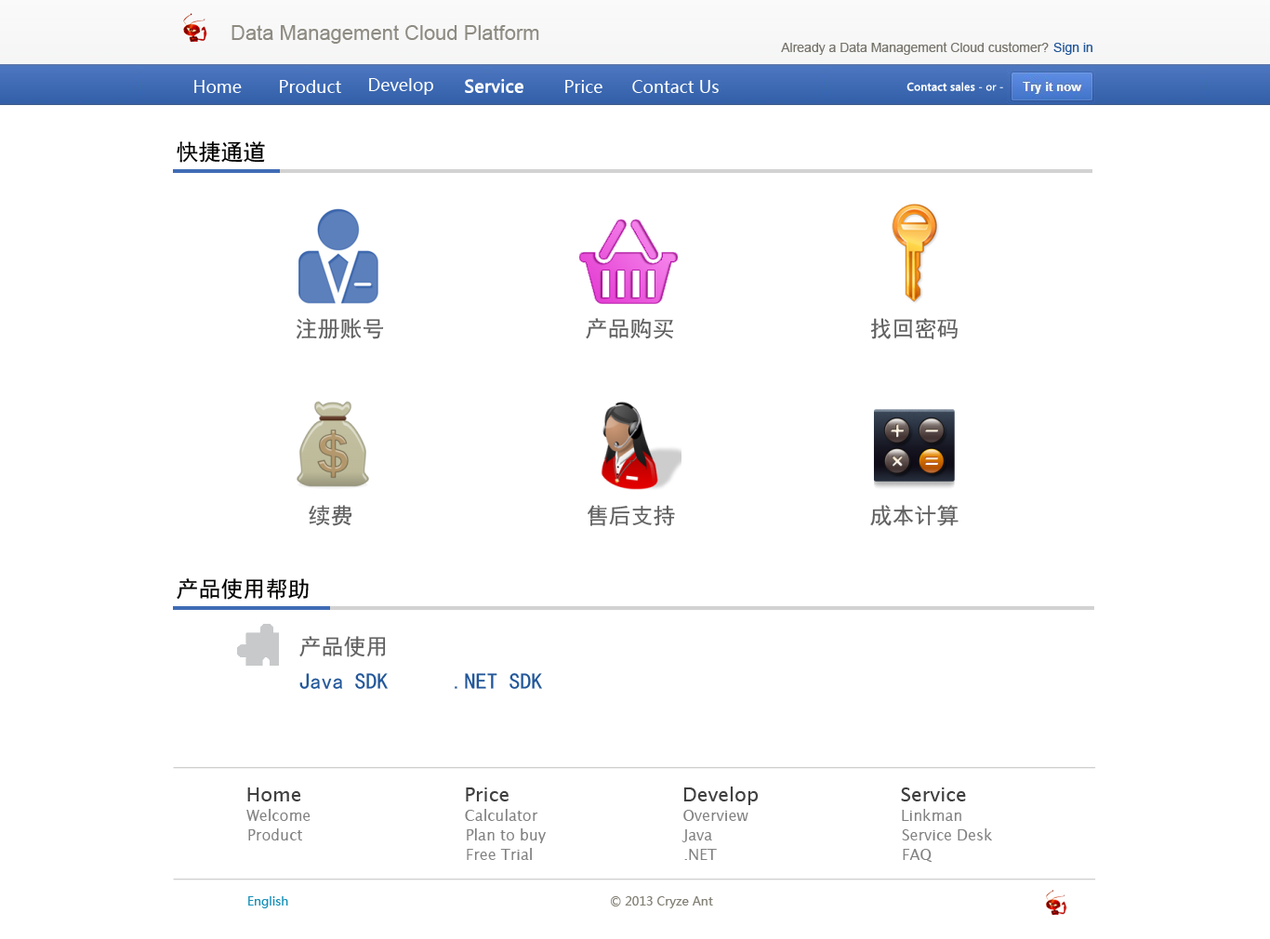
<style>
.page{position:relative;width:1270px;height:939px;background:#ffffff}
.page>*{position:absolute;margin:0}
.t1{font:20.5px "ArialMT";color:#8e8b82}
.t2{font:13px "ArialMT";color:#77746b}
.t3{font:13px "ArialMT";color:#225799}
.t4{font:16.7px "MicrosoftYaHei";color:#ffffff}
.t5{font:16.7px "MicrosoftYaHei";color:#ffffff;font-weight:bold}
.t6{font:10.2px "MicrosoftYaHei";color:#ffffff;font-weight:bold}
.t7{font:10.2px "MicrosoftYaHei";color:#ffffff}
.t8{font:22.3px "SimHei";color:#010100}
.t9{font:22.3px "SimHei";color:#606061}
.t10{font:22.3px "SimHei";color:#225799}
.t11{font:19.5px "LucidaSans";color:#404040}
.t12{font:19.5px "LucidaSans";color:#3f3f3f}
.t13{font:14.9px "LucidaSans";color:#818181}
.t14{font:12.1px "MicrosoftYaHei";color:#1791b8}
.t15{font:12.1px "MicrosoftYaHei";color:#827f74}
</style>
<div class="page">
<p class="t1" style="left:231px;top:25px;width:308px;height:19px">Data Management Cloud Platform</p>
<p class="t2" style="left:781px;top:42px;width:268px;height:13px">Already a Data Management Cloud customer?</p>
<p class="t3" style="left:1053px;top:43px;width:39px;height:12px">Sign in</p>
<p class="t4" style="left:194px;top:80px;width:48px;height:13px">Home</p>
<p class="t4" style="left:280px;top:80px;width:61px;height:13px">Product</p>
<p class="t4" style="left:369px;top:78px;width:64px;height:17px">Develop</p>
<p class="t5" style="left:465px;top:79px;width:58px;height:14px">Service</p>
<p class="t4" style="left:565px;top:80px;width:37px;height:13px">Price</p>
<p class="t4" style="left:632px;top:80px;width:87px;height:13px">Contact Us</p>
<p class="t6" style="left:906px;top:82px;width:97px;height:9px">Contact sales<span class="t7"> - or -</span></p>
<p class="t8" style="left:177px;top:141px;width:88px;height:22px">快捷通道</p>
<p class="t9" style="left:296px;top:318px;width:88px;height:21px">注册账号</p>
<p class="t9" style="left:586px;top:318px;width:88px;height:21px">产品购买</p>
<p class="t9" style="left:870px;top:318px;width:88px;height:21px">找回密码</p>
<p class="t9" style="left:309px;top:505px;width:43px;height:21px">续费</p>
<p class="t9" style="left:587px;top:505px;width:88px;height:21px">售后支持</p>
<p class="t9" style="left:870px;top:505px;width:88px;height:21px">成本计算</p>
<p class="t8" style="left:177px;top:578px;width:132px;height:22px">产品使用帮助</p>
<p class="t9" style="left:299px;top:636px;width:87px;height:21px">产品使用</p>
<p class="t10" style="left:299px;top:673px;width:89px;height:16px">Java SDK</p>
<p class="t10" style="left:455px;top:673px;width:87px;height:16px">.NET SDK</p>
<p class="t11" style="left:247px;top:787px;width:54px;height:14px">Home</p>
<p class="t12" style="left:466px;top:787px;width:43px;height:14px">Price</p>
<p class="t11" style="left:683px;top:787px;width:76px;height:18px">Develop</p>
<p class="t12" style="left:901px;top:787px;width:65px;height:14px">Service</p>
<p class="t13" style="left:246px;top:809px;width:65px;height:12px">Welcome</p>
<p class="t13" style="left:465px;top:809px;width:73px;height:12px">Calculator</p>
<p class="t13" style="left:683px;top:810px;width:65px;height:11px">Overview</p>
<p class="t13" style="left:902px;top:809px;width:59px;height:12px">Linkman</p>
<p class="t13" style="left:248px;top:828px;width:54px;height:12px">Product</p>
<p class="t13" style="left:467px;top:828px;width:79px;height:15px">Plan to buy</p>
<p class="t13" style="left:681px;top:829px;width:31px;height:13px">Java</p>
<p class="t13" style="left:902px;top:828px;width:90px;height:12px">Service Desk</p>
<p class="t13" style="left:467px;top:848px;width:65px;height:12px">Free Trial</p>
<p class="t13" style="left:684px;top:849px;width:33px;height:11px">.NET</p>
<p class="t13" style="left:903px;top:849px;width:29px;height:14px">FAQ</p>
<p class="t14" style="left:248px;top:896px;width:40px;height:12px">English</p>
<p class="t15" style="left:611px;top:896px;width:102px;height:12px">© 2013 Cryze Ant</p>
</div>
